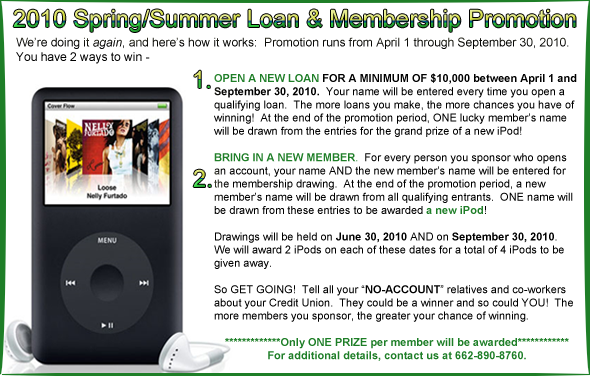
<style>
.page{position:relative;width:590px;height:376px;background:#ffffff}
.page>*{position:absolute;margin:0}
.t1{font:24px "ArialMT"}
.t2{font:12px "ArialMT";color:#000000}
.t3{font:12px "Arial-ItalicMT";color:#000000}
.t4{font:11px "ArialMT";color:#000000}
.t5{font:11px "Arial-BoldMT";color:#1e7e27}
.t6{font:11px "Arial-BoldMT";color:#000000}
.t7{font:11px "ArialMT";color:#1e7e27}
</style>
<div class="page">
<p class="t1" style="left:13px;top:9px;width:563px;height:23px">2010 Spring/Summer Loan &amp; Membership Promotion</p>
<p class="t2" style="left:16px;top:37px;width:553px;height:27px">We’re doing it <span class="t3">again</span>, and here’s how it works:  Promotion runs from April 1 through September 30, 2010.  You have 2 ways to win -</p>
<p class="t1" style="left:194px;top:70px;width:16px;height:18px">1.</p>
<p class="t4" style="left:214px;top:73px;width:363px;height:288px"><span class="t2"><br><br><br><br></span><span class="t5">OPEN A NEW LOAN</span><span class="t6"> FOR A MINIMUM OF $10,000 between April 1 and September 30, 2010.</span>  Your name will be entered every time you open a qualifying loan.  The more loans you make, the more chances you have of winning!  At the end of the promotion period, ONE lucky member’s name will be drawn from the entries for the grand prize of a new iPod!<br><br><span class="t5">BRING IN A NEW MEMBER</span><span class="t7">.  </span>For every person you sponsor who opens an account, your name AND the new member’s name will be entered for the membership drawing.  At the end of the promotion period, a new member’s name will be drawn from all qualifying entrants.  ONE name will be drawn from these entries to be awarded <span class="t5">a new iPod</span>!<br><br>Drawings will be held on <span class="t6">June 30, 2010</span> AND on <span class="t6">September 30, 2010</span>.  We will award 2 iPods on each of these dates for a total of 4 iPods to be given away.<br><br>So GET GOING!  Tell all your “<span class="t6">NO-ACCOUNT</span>” relatives and co-workers about your Credit Union.  They could be a winner and so could YOU!  The more members you sponsor, the greater your chance of winning.<br><br><span class="t5">*************Only ONE PRIZE per member will be awarded************<br>For additional details, contact us at 662-890-8760.</span></p>
<p class="t1" style="left:193px;top:169px;width:18px;height:18px">2.</p>
</div>
